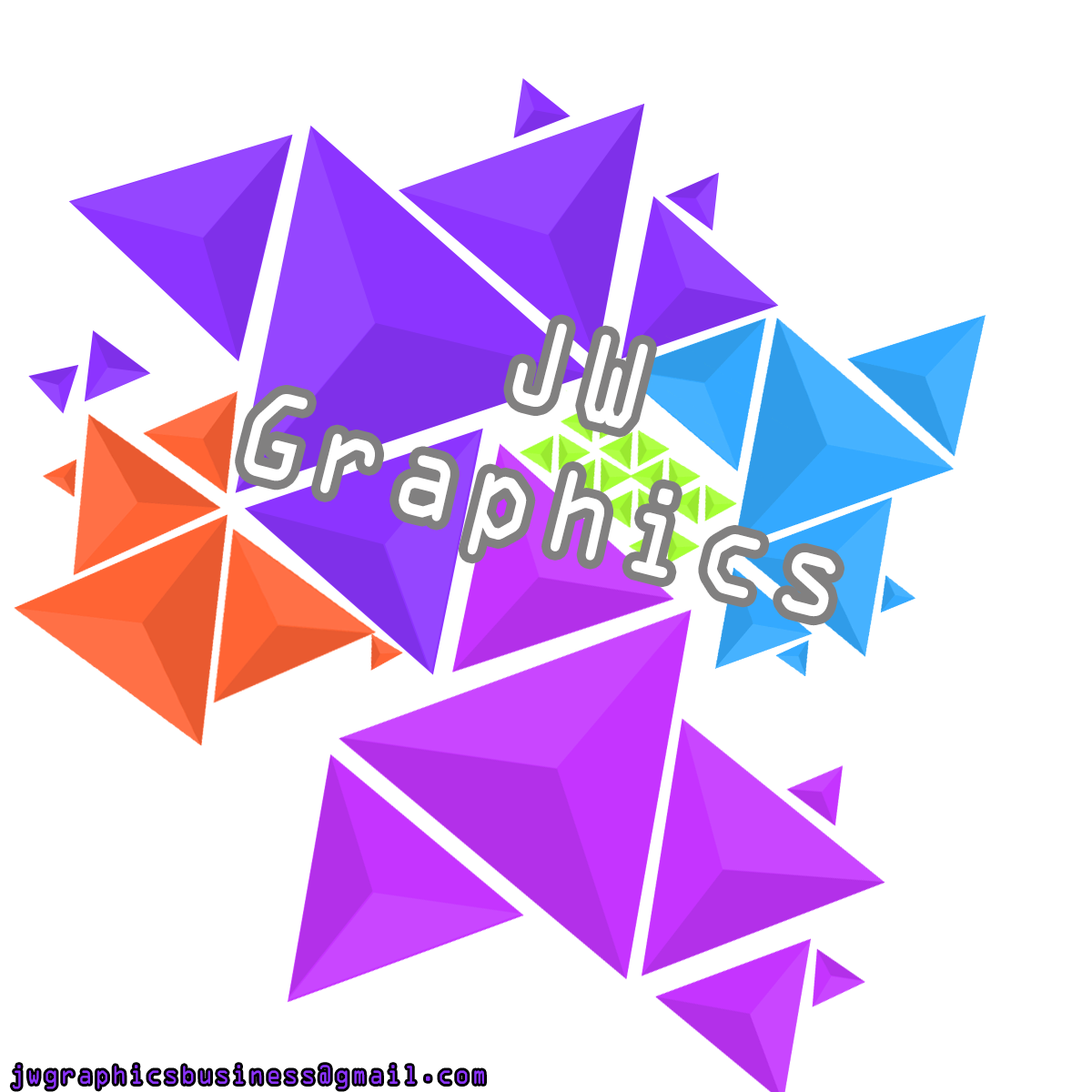
<style>
.page{position:relative;width:1092px;height:1092px;background:#ffffff}
.page>*{position:absolute;margin:0}
.t1{font:112.3px "OCRAStd";letter-spacing:0.1em;color:#ffffff;scale:0.86 1}
</style>
<div class="page">
<p class="t1" style="left:244px;top:323px;width:591px;height:294px;text-align:center;rotate:14deg">JW <br>Graphics</p>
</div>
